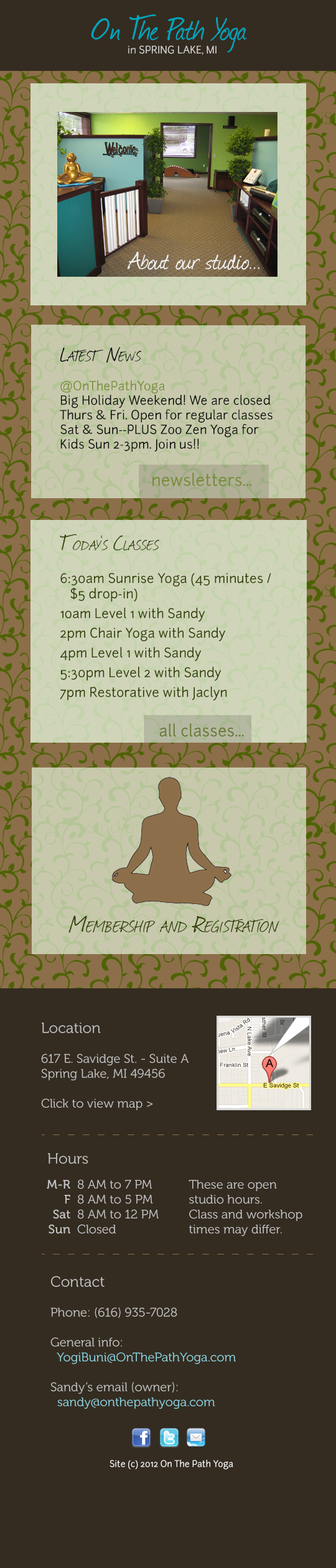
<style>
.page{position:relative;width:336px;height:1568px;background:#342c21}
.page>*{position:absolute;margin:0}
.t1{font:37.3px "Journal";color:#00a5bd}
.t2{font:10px "Junction";color:#d5d5d4}
.t3{font:29.5px "Journal";color:#f0f0f0}
.t4{font:12.2px "Junction";color:#000000}
.t5{font:24.3px "Journal";color:#000000;font-variant:small-caps}
.t6{font:12.2px "Junction";color:#7a8c37}
.t7{font:16.2px "Junction";color:#7a8c37}
.t8{font:12.8px/19.7px "Junction";color:#323e03}
.t9{font:23.6px "Journal";color:#323e03;font-variant:small-caps}
.t10{font:12.8px "Junction";color:#323e03}
.t11{font:15.8px "Junction";color:#687634}
.t12{font:27.3px "Journal";color:#323e03;font-variant:small-caps}
.t13{font:12.4px "Museo-300";color:#c3c3c3}
.t14{font:14.9px "Museo-300";color:#c3c3c3}
.t15{font:12.4px "Museo-500";color:#c3c3c3}
.t16{font:12.4px "Museo-300";color:#8ed4df}
.t17{font:8.7px "Junction";color:#ffffff}
</style>
<div class="page">
<p class="t1" style="left:91px;top:14px;width:156px;height:38px">On The Path Yoga</p>
<p class="t2" style="left:128px;top:45px;width:88px;height:10px">in SPRING LAKE, MI</p>
<p class="t3" style="left:128px;top:251px;width:131px;height:19px">About our studio...</p>
<p class="t4" style="left:60px;top:347px;width:212px;height:105px;opacity:0.97"><span class="t5">Latest News<br><br></span><span class="t6">@OnThePathYoga<br></span>Big Holiday Weekend! We are closed Thurs &amp; Fri. Open for regular classes Sat &amp; Sun--PLUS Zoo Zen Yoga for Kids Sun 2-3pm. Join us!!</p>
<p class="t7" style="left:152px;top:473px;width:100px;height:13px">newsletters...</p>
<p class="t8" style="left:60px;top:534px;width:211px;height:167px"><span class="t9">Today’s Classes<br><br></span><span class="t10">6:30am Sunrise Yoga (45 minutes /       $5 drop-in)<br></span>10am Level 1 with Sandy<br>2pm Chair Yoga with Sandy<br>4pm Level 1 with Sandy<br>5:30pm Level 2 with Sandy<br>7pm Restorative with Jaclyn</p>
<p class="t11" style="left:159px;top:723px;width:85px;height:14px">all classes...</p>
<p class="t12" style="left:68px;top:916px;width:211px;height:18px">Membership and Registration</p>
<p class="t13" style="left:41px;top:1023px;width:148px;height:87px"><span class="t14">Location<br></span><br>617 E. Savidge St. - Suite A<br>Spring Lake, MI 49456<br><br>Click to view map &gt;</p>
<p class="t14" style="left:48px;top:1153px;width:40px;height:11px">Hours</p>
<p class="t15" style="left:47px;top:1180px;width:23px;height:54px;text-align:right">M-R<br>F      <br>Sat<br>Sun</p>
<p class="t13" style="left:77px;top:1179px;width:82px;height:55px">8 AM to 7 PM<br>8 AM to 5 PM<br>8 AM to 12 PM<br>Closed</p>
<p class="t13" style="left:188px;top:1180px;width:114px;height:56px">These are open studio hours.  <br>Class and workshop times may differ.</p>
<p class="t13" style="left:50px;top:1276px;width:186px;height:133px"><span class="t14">Contact<br></span><br>Phone: (616) 935-7028<br><br>General info:<br>  <span class="t16">YogiBuni@OnThePathYoga.com<br></span><br>Sandy’s email (owner): <br>  <span class="t16">sandy@onthepathyoga.com</span></p>
<p class="t17" style="left:109px;top:1460px;width:124px;height:10px">Site (c) 2012 On The Path Yoga</p>
</div>
